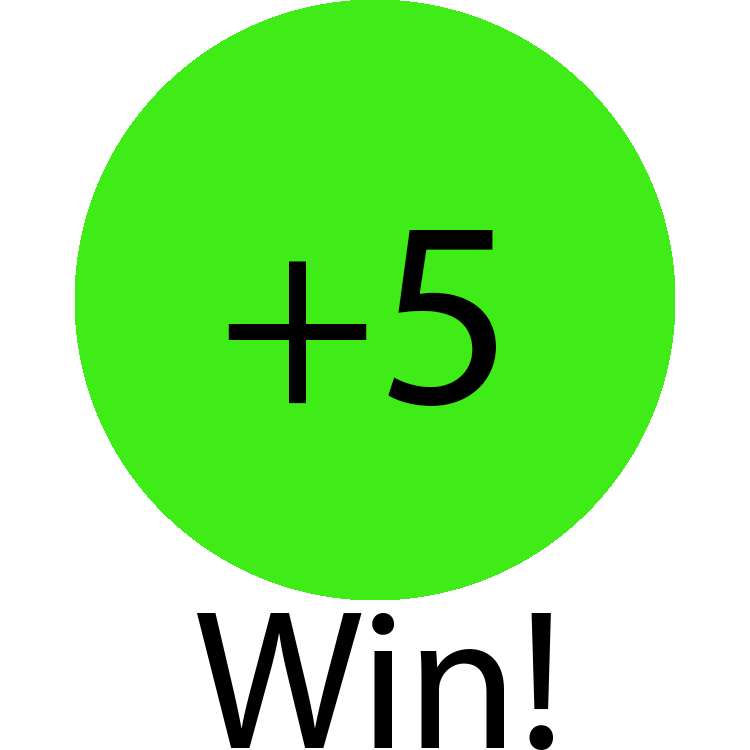
<style>
.page{position:relative;width:750px;height:750px;background:#3fec17}
.page>*{position:absolute;margin:0}
.t1{font:266.7px "MyriadPro-Regular";color:#000000}
.t2{font:200px "MyriadPro-Regular";color:#000000}
</style>
<div class="page">
<p class="t1" style="left:228px;top:230px;width:268px;height:177px">+53fb55b1</p>
<p class="t2" style="left:197px;top:613px;width:356px;height:137px">Win!</p>
</div>
